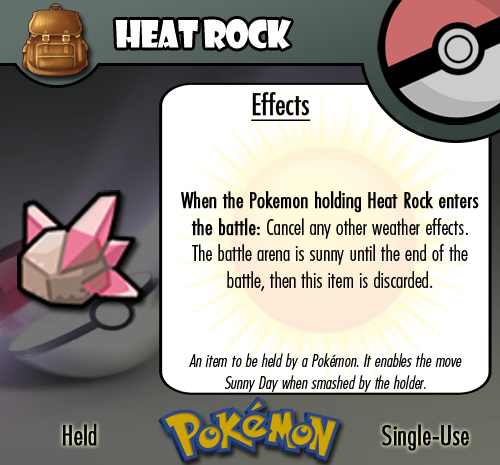
<style>
.page{position:relative;width:500px;height:465px}
.page>*{position:absolute;margin:0}
.t1{font:36.7px "ShowcardGothic-Reg";letter-spacing:-0.025em;color:#ffffff;scale:0.91 1}
.t2{font:22.2px "FuturaCondensedBQ-Light";color:#010101}
.t3{font:27.8px "FuturaCondensedBQ-Light";color:#010101;font-weight:bold}
.t4{font:30.6px "FuturaCondensedBQ-Light";color:#010101;font-weight:bold;text-decoration:underline}
.t5{font:22.2px "FuturaCondensedBQ-Light";color:#010101;font-weight:bold}
.t6{font:18.1px "FuturaCondensedBQ-Light";color:#010101;font-style:italic}
</style>
<div class="page">
<p class="t1" style="left:115px;top:19px;width:176px;height:31px">Heat Rock</p>
<p class="t2" style="left:181px;top:92px;width:298px;height:200px"><span class="t3">  </span><span class="t4">Effects<br><br><br></span><span class="t5">When the Pokemon holding Heat Rock enters the battle: </span>Cancel any other weather effects. The battle arena is sunny until the end of the battle, then this item is discarded.</p>
<p class="t6" style="left:189px;top:353px;width:273px;height:39px;text-align:center">An item to be held by a Pokémon. It enables the move Sunny Day when smashed by the holder.</p>
<p class="t3" style="left:63px;top:423px;width:34px;height:23px">Held</p>
<p class="t3" style="left:382px;top:424px;width:87px;height:27px">Single-Use</p>
</div>
